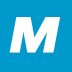
<style>
.page{position:relative;width:72px;height:72px;background:#0099cc}
.page>*{position:absolute;margin:0}
.t1{font:48.5px "AvenirNext-Bold";color:#fffffe;text-transform:uppercase;font-weight:bold;font-style:italic;scale:1.07 1}
</style>
<div class="page">
<p class="t1" style="left:9px;top:17px;width:51px;height:36px">M</p>
</div>
